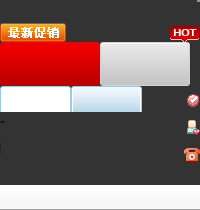
<style>
.page{position:relative;width:200px;height:210px;background:#333333}
.page>*{position:absolute;margin:0}
.t1{font:12px "NSimSun";color:#ffffff;text-transform:uppercase;font-weight:bold}
</style>
<div class="page">
<p class="t1" style="left:8px;top:27px;width:51px;height:11px">最新促销</p>
</div>
